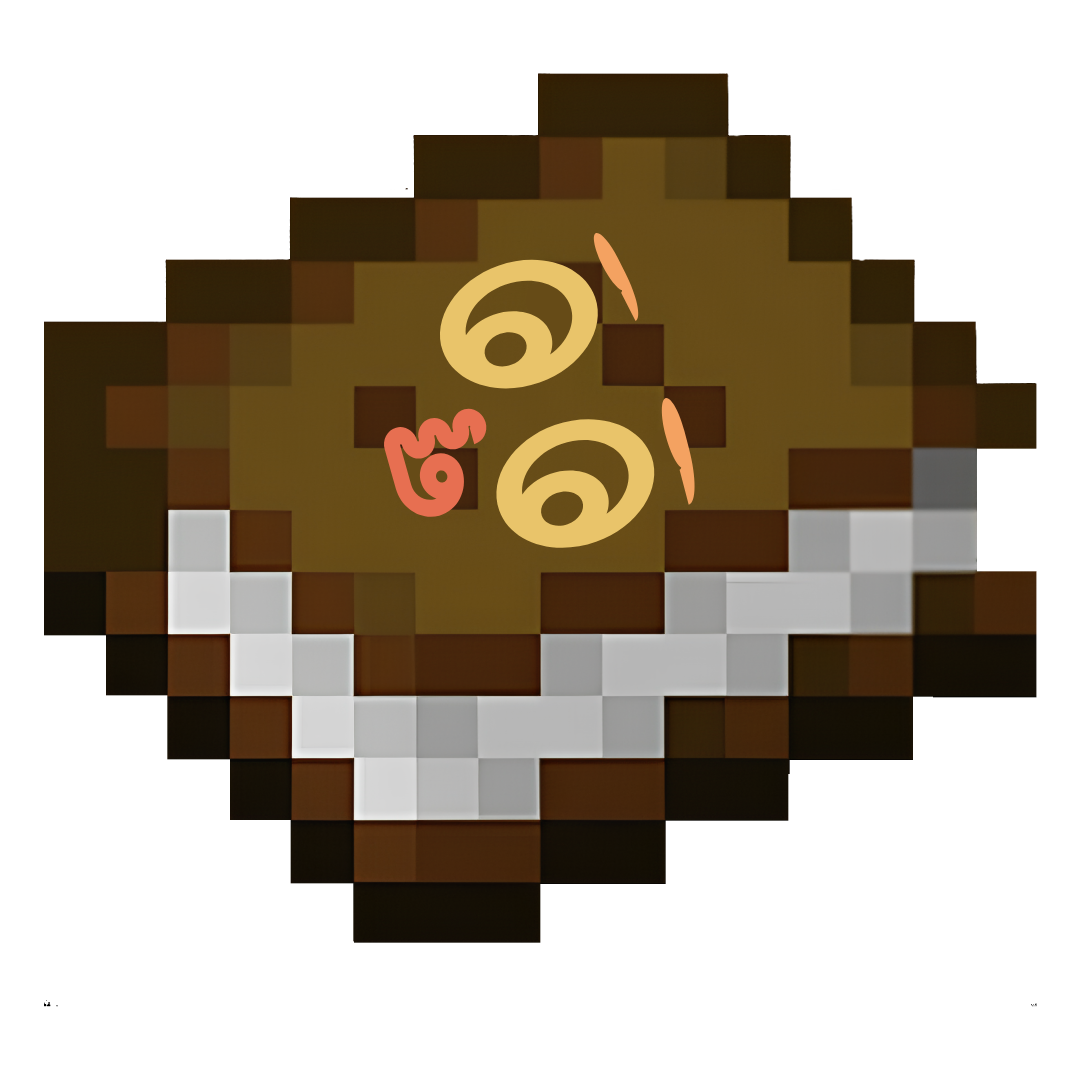
<style>
.page{position:relative;width:1080px;height:1080px;background:#ffffff}
.page>*{position:absolute;margin:0}
.t1{font:237.5px "VenusRegular";color:#f4a261;scale:0.27 1}
.t2{font:185.2px "VenusRegular";color:#e9c46a;scale:0.77 1}
.t3{font:269.6px "VenusRegular";color:#f4a261;scale:0.27 1}
.t4{font:119.7px "VenusRegular";color:#e76f51;scale:1.08 1}
</style>
<div class="page">
<p class="t1" style="left:593px;top:233px;width:46px;height:88px;rotate:-28deg">,</p>
<p class="t2" style="left:440px;top:259px;width:158px;height:130px;rotate:70deg">O</p>
<p class="t3" style="left:661px;top:398px;width:34px;height:107px;rotate:-14deg">,</p>
<p class="t4" style="left:384px;top:408px;width:103px;height:109px;rotate:74deg">P</p>
<p class="t2" style="left:496px;top:419px;width:159px;height:129px;rotate:70deg">O</p>
</div>
